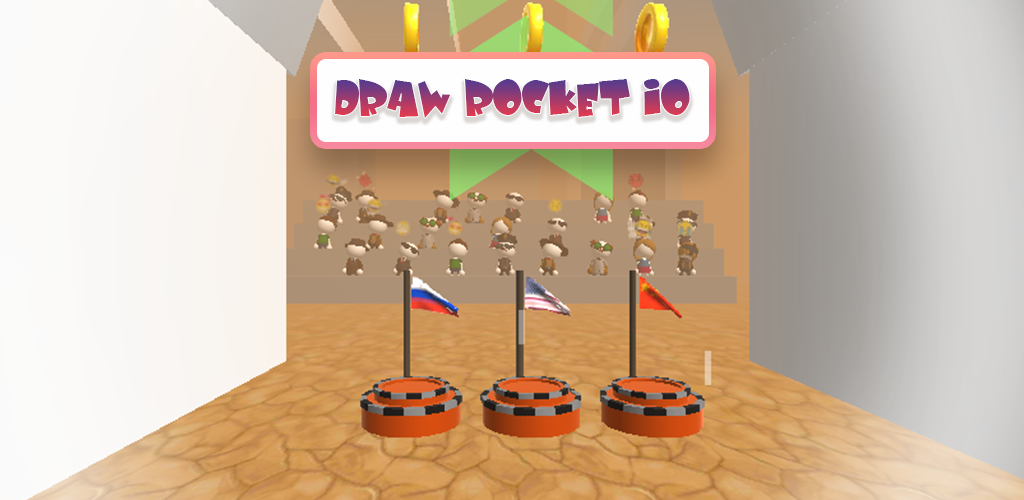
<style>
.page{position:relative;width:1024px;height:500px}
.page>*{position:absolute;margin:0}
.t1{font:43.1px "BabyKruffy"}
</style>
<div class="page">
<p class="t1" style="left:335px;top:79px;width:355px;height:39px">DRAW ROCKET io</p>
</div>
